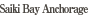
<style>
.page{position:relative;width:88px;height:18px;background:#ffffff}
.page>*{position:absolute;margin:0}
.t1{font:12px "RyuminPro-ExBold";letter-spacing:-0.08em;color:#4c4843;scale:0.85 1}
</style>
<div class="page">
<p class="t1" style="left:0px;top:4px;width:88px;height:11px">Saiki Bay Anchorage</p>
</div>
